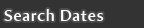
<style>
.page{position:relative;width:144px;height:28px;background:#333333}
.page>*{position:absolute;margin:0}
.t1{font:16px "AmiraParadiso";letter-spacing:0.05em;color:#ffffff}
</style>
<div class="page">
<p class="t1" style="left:4px;top:9px;width:100px;height:12px">Search Dates</p>
</div>
